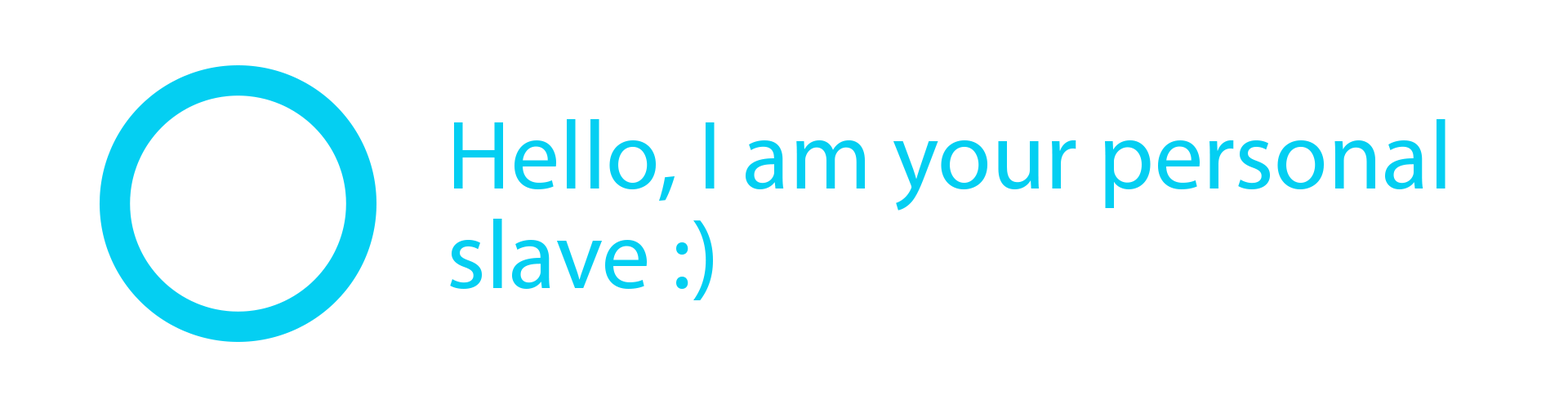
<style>
.page{position:relative;width:1568px;height:408px;background:#ffffff}
.page>*{position:absolute;margin:0}
.t1{font:98px/99.6px "MyriadPro-Regular";color:#04cff2}
</style>
<div class="page">
<p class="t1" style="left:450px;top:119px;width:996px;height:182px">Hello, I am your personal slave :)</p>
</div>
